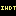
<style>
.page{position:relative;width:16px;height:16px;background:#000000}
.page>*{position:absolute;margin:0}
.t1{font:7px "Br-Ocrb";color:#f0f080;font-weight:bold}
</style>
<div class="page">
<p class="t1" style="left:1px;top:6px;width:15px;height:4px">INDT</p>
</div>
